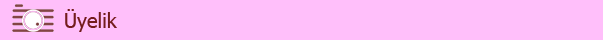
<style>
.page{position:relative;width:603px;height:40px;background:#ffbffa}
.page>*{position:absolute;margin:0}
.t1{font:20px "Tahoma";color:#731c1c}
</style>
<div class="page">
<p class="t1" style="left:65px;top:9px;width:52px;height:23px">Üyelik</p>
</div>
